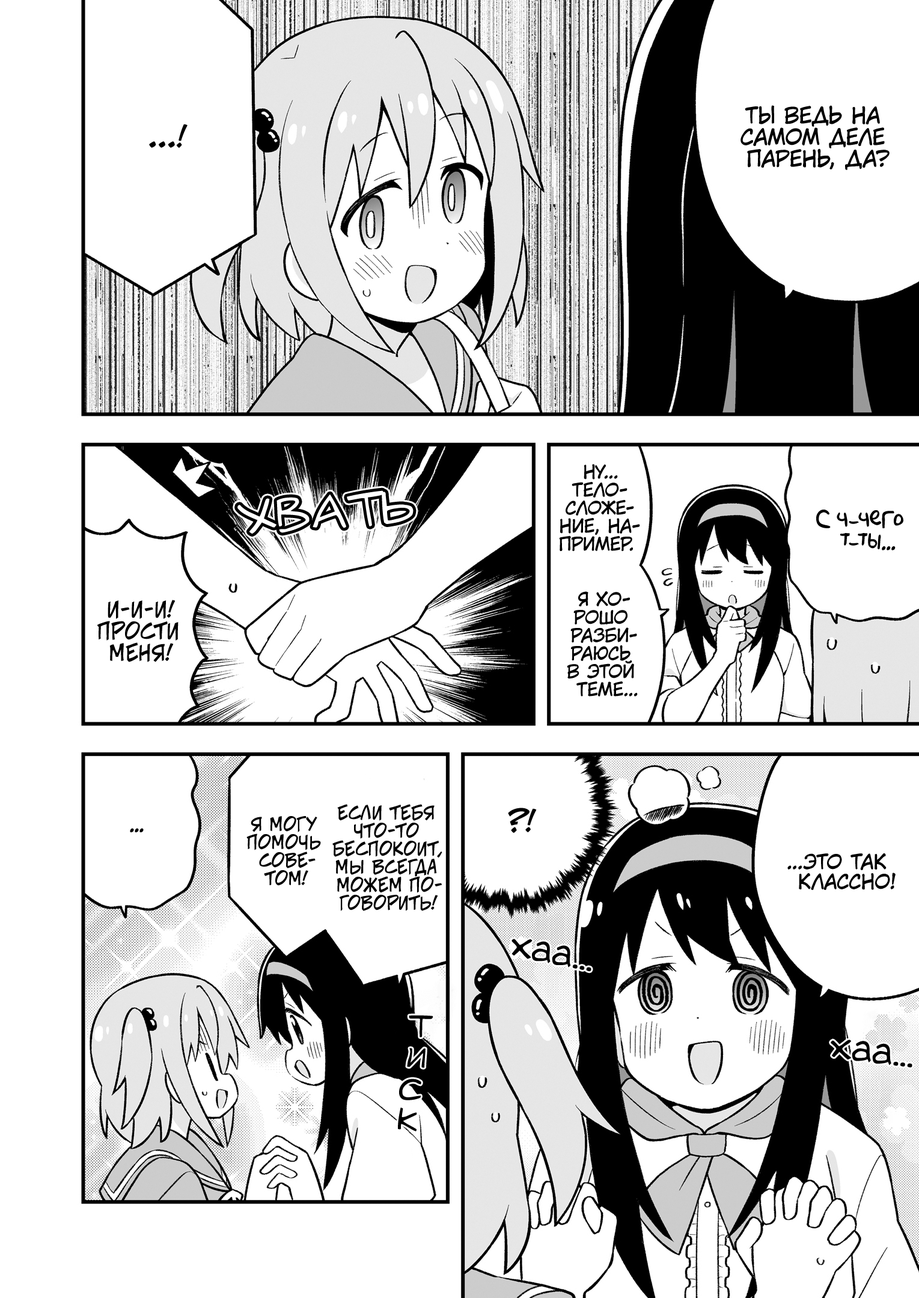
<style>
.page{position:relative;width:919px;height:1298px;background:#ffffff}
.page>*{position:absolute;margin:0}
.t1{font:21.6px "KuraiVoice2";color:#000000;text-transform:uppercase}
.t2{font:28.8px "v_CCJeffCampbell";color:#000000;text-transform:uppercase}
.t3{font:18px "KuraiVoice2";color:#000000;text-transform:uppercase}
.t4{font:45.1px "v_Augie";color:#ffffff;text-transform:uppercase}
.t5{font:21.6px "AkbarPlain";color:#000000}
.t6{font:21.6px "v_CCJeffCampbell";color:#000000;text-transform:uppercase}
.t7{font:18px "v_CCJeffCampbell";color:#000000;text-transform:uppercase}
.t8{font:19.8px "KuraiVoice2";color:#000000;text-transform:uppercase}
.t9{font:39.7px "v_Augie";color:#000000}
.t10{font:28.8px "v_Augie";color:#000000;text-transform:uppercase;font-weight:bold}
</style>
<div class="page">
<p class="t1" style="left:740px;top:105px;width:149px;height:65px;text-align:center">Ты ведь на<br>самом деле<br>парень, да?</p>
<p class="t2" style="left:149px;top:124px;width:38px;height:24px">...!</p>
<p class="t3" style="left:559px;top:464px;width:81px;height:87px;text-align:center">Ну...<br>Тело-<br>сложе-<br>ние, на-<br>пример.</p>
<p class="t4" style="left:237px;top:490px;width:176px;height:44px;rotate:-4deg">хвать</p>
<p class="t5" style="left:816px;top:510px;width:87px;height:40px;text-align:center">С ч-чего<br>т-ты...</p>
<p class="t3" style="left:567px;top:591px;width:71px;height:105px;text-align:center">Я хо-<br>рошо<br>разби-<br>раюсь<br>в этой<br>теме...</p>
<p class="t6" style="left:97px;top:600px;width:81px;height:62px;text-align:center">И-и-и!<br>Прости<br>меня!</p>
<p class="t7" style="left:332px;top:804px;width:110px;height:107px;text-align:center">Если тебя<br>что-то<br>беспокоит,<br>мы всегда<br>можем по-<br>говорить!</p>
<p class="t2" style="left:508px;top:808px;width:29px;height:25px">?!</p>
<p class="t7" style="left:246px;top:816px;width:75px;height:70px;text-align:center">Я могу<br>помочь<br>сове-<br>том!</p>
<p class="t5" style="left:130px;top:828px;width:14px;height:4px">...</p>
<p class="t8" style="left:787px;top:853px;width:108px;height:37px;text-align:center">...Это так<br>классно!</p>
<p class="t9" style="left:511px;top:939px;width:80px;height:33px;rotate:11deg">хаа...</p>
<p class="t10" style="left:409px;top:1015px;width:24px;height:22px;rotate:6deg">т</p>
<p class="t10" style="left:407px;top:1048px;width:18px;height:20px;rotate:8deg">и</p>
<p class="t9" style="left:830px;top:1040px;width:82px;height:28px;rotate:7deg">хаа...</p>
<p class="t10" style="left:399px;top:1079px;width:22px;height:21px;rotate:3deg">с</p>
<p class="t10" style="left:398px;top:1107px;width:19px;height:24px;rotate:6deg">к</p>
</div>
